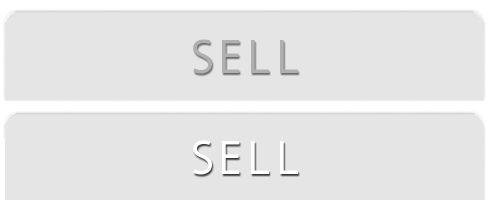
<style>
.page{position:relative;width:490px;height:200px;background:#e5e5e5}
.page>*{position:absolute;margin:0}
.t1{font:48px "AndaleMono";color:#999999}
.t2{font:48px "AndaleMono";color:#ffffff}
</style>
<div class="page">
<p class="t1" style="left:193px;top:39px;width:105px;height:35px;opacity:0.7">SELL</p>
<p class="t2" style="left:193px;top:140px;width:105px;height:35px">SELL</p>
</div>
